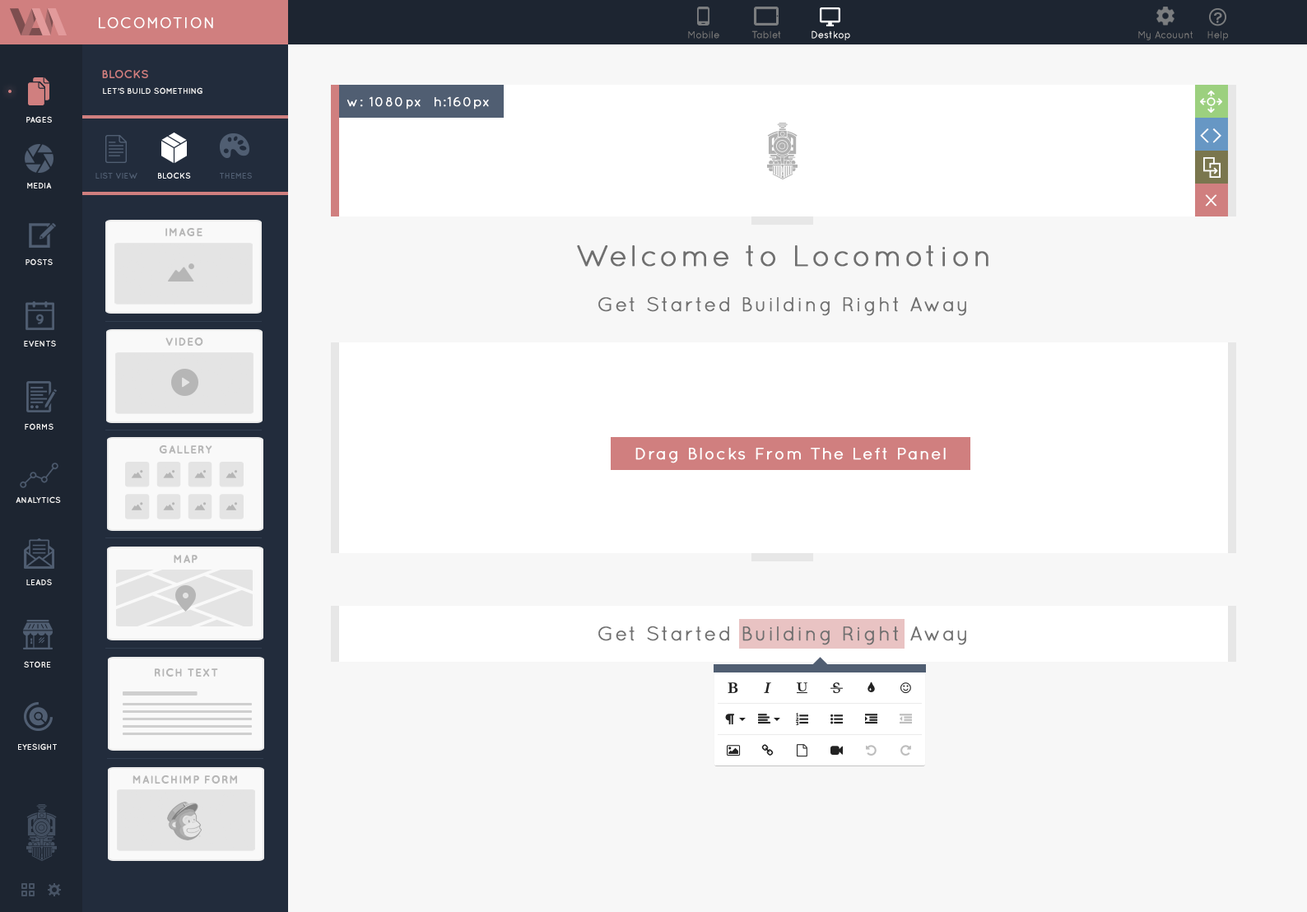
<style>
.page{position:relative;width:1307px;height:912px;background:#f7f7f7}
.page>*{position:absolute;margin:0}
.t1{font:14.8px "Quicksand-Regular";letter-spacing:0.07em;color:#ffffff;font-weight:bold}
.t2{font:9.9px "Quicksand-Regular";color:#797979}
.t3{font:9.9px "Quicksand-Regular";color:#ffffff}
.t4{font:11.5px "Quicksand-Bold";color:#d07f7f;text-transform:uppercase}
.t5{font:8.2px "Quicksand-Bold";color:#f7f7f7;text-transform:uppercase}
.t6{font:13px "Quicksand-Regular";letter-spacing:0.07em;color:#ffffff;font-weight:bold}
.t7{font:18.5px "EuphemiaUCAS";letter-spacing:0.12em;color:#ffffff;text-transform:uppercase;scale:1.12 1}
.t8{font:8.2px "Quicksand-Bold";color:#505e72;text-transform:uppercase}
.t9{font:8.2px "Quicksand-Bold";color:#f9f9f9;text-transform:uppercase}
.t10{font:15.6px "Quicksand-Regular";letter-spacing:0.07em;color:#ffffff;font-weight:bold;scale:1.27 1}
.t11{font:11.3px "Quicksand-Bold";letter-spacing:0.05em;color:#b6b6b6;text-transform:uppercase}
.t12{font:29.6px "Quicksand-Regular";letter-spacing:0.07em;color:#6f6f6f;font-weight:bold}
.t13{font:19.8px "Quicksand-Regular";letter-spacing:0.07em;color:#6f6f6f;font-weight:bold}
.t14{font:16.5px "Quicksand-Regular";letter-spacing:0.07em;color:#ffffff;font-weight:bold}
</style>
<div class="page">
<p class="t1" style="left:99px;top:17px;width:114px;height:12px">LOCOMOTION</p>
<p class="t2" style="left:688px;top:30px;width:32px;height:9px">Mobile</p>
<p class="t2" style="left:752px;top:30px;width:29px;height:9px">Tablet</p>
<p class="t3" style="left:812px;top:30px;width:38px;height:10px">Destkop</p>
<p class="t2" style="left:1139px;top:30px;width:54px;height:10px">My Acouunt</p>
<p class="t2" style="left:1208px;top:30px;width:20px;height:10px">Help</p>
<p class="t4" style="left:102px;top:70px;width:46px;height:8px">BLOCKS</p>
<p class="t5" style="left:103px;top:87px;width:100px;height:7px">Let’s build something</p>
<p class="t6" style="left:347px;top:96px;width:142px;height:13px">w: 1080px  h:160px</p>
<p class="t5" style="left:26px;top:116px;width:26px;height:7px">PAGES</p>
<p class="t7" style="left:1200px;top:128px;width:22px;height:15px">&lt;&gt;</p>
<p class="t8" style="left:95px;top:172px;width:42px;height:7px">LIST VIEW</p>
<p class="t9" style="left:158px;top:172px;width:33px;height:7px">BLOCKS</p>
<p class="t8" style="left:220px;top:172px;width:32px;height:7px">THEMES</p>
<p class="t5" style="left:27px;top:183px;width:25px;height:6px">MEDIA</p>
<p class="t10" style="left:1205px;top:194px;width:13px;height:13px">X</p>
<p class="t11" style="left:165px;top:228px;width:38px;height:8px">IMAGE</p>
<p class="t12" style="left:577px;top:245px;width:412px;height:22px">Welcome to Locomotion</p>
<p class="t5" style="left:26px;top:258px;width:27px;height:7px">POSTS</p>
<p class="t13" style="left:598px;top:296px;width:368px;height:20px">Get Started Building Right Away</p>
<p class="t5" style="left:24px;top:340px;width:32px;height:7px">EVENTS</p>
<p class="t11" style="left:165px;top:338px;width:38px;height:8px">VIDEO</p>
<p class="t5" style="left:25px;top:423px;width:29px;height:7px">FORMS</p>
<p class="t11" style="left:159px;top:445px;width:53px;height:9px">GALLERY</p>
<p class="t14" style="left:636px;top:448px;width:310px;height:15px">Drag Blocks From The Left Panel</p>
<p class="t5" style="left:16px;top:496px;width:45px;height:7px">ANALYTICS</p>
<p class="t11" style="left:174px;top:555px;width:24px;height:8px">MAP</p>
<p class="t5" style="left:26px;top:579px;width:26px;height:6px">LEADS</p>
<p class="t13" style="left:598px;top:626px;width:368px;height:19px">Get Started Building Right Away</p>
<p class="t5" style="left:24px;top:661px;width:27px;height:7px">STORE</p>
<p class="t11" style="left:155px;top:668px;width:63px;height:9px">RICH TEXT</p>
<p class="t5" style="left:18px;top:743px;width:39px;height:7px">EYESIGHT</p>
<p class="t11" style="left:133px;top:775px;width:104px;height:9px">MAILCHIMP Form</p>
</div>
